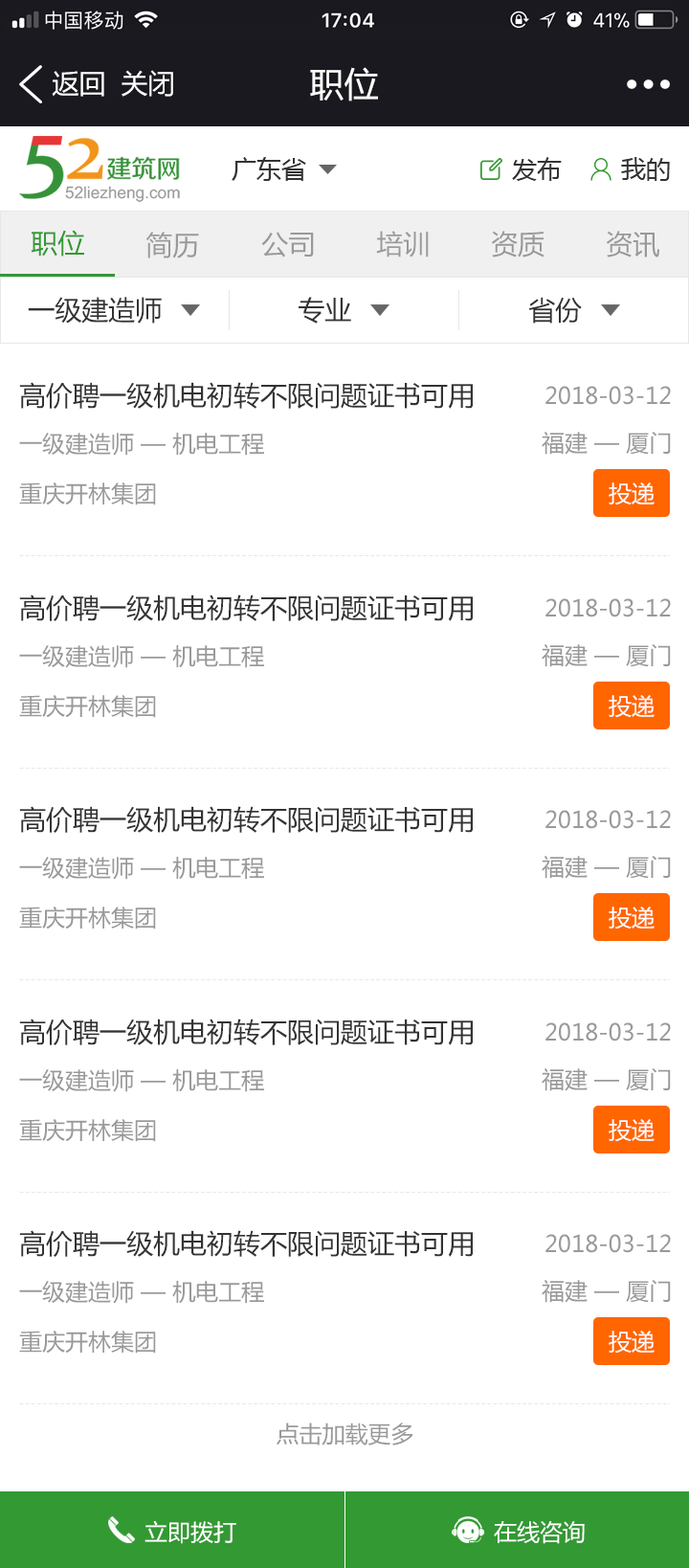
<style>
.page{position:relative;width:689px;height:1568px;background:#ffffff}
.page>*{position:absolute;margin:0}
.t1{font:26.8px "MicrosoftYaHei";color:#ffffff}
.t2{font:34.5px "MicrosoftYaHei";color:#ffffff}
.t3{font:24.9px "MicrosoftYaHei";color:#333333}
.t4{font:26.8px "MicrosoftYaHei";color:#339933}
.t5{font:26.8px "MicrosoftYaHei";color:#999999}
.t6{font:26.8px "MicrosoftYaHei";color:#333333}
.t7{font:23px "MicrosoftYaHei";color:#999999}
.t8{font:23px "MicrosoftYaHei";color:#ffffff}
</style>
<div class="page">
<p class="t1" style="left:52px;top:71px;width:52px;height:26px">返回</p>
<p class="t1" style="left:122px;top:70px;width:51px;height:27px">关闭</p>
<p class="t2" style="left:310px;top:67px;width:68px;height:34px">职位</p>
<p class="t3" style="left:232px;top:157px;width:74px;height:24px">广东省</p>
<p class="t3" style="left:512px;top:157px;width:50px;height:24px">发布</p>
<p class="t3" style="left:621px;top:157px;width:49px;height:24px">我的</p>
<p class="t4" style="left:31px;top:230px;width:53px;height:27px">职位</p>
<p class="t5" style="left:146px;top:232px;width:53px;height:26px">简历</p>
<p class="t5" style="left:261px;top:232px;width:53px;height:26px">公司</p>
<p class="t5" style="left:376px;top:231px;width:53px;height:27px">培训</p>
<p class="t5" style="left:491px;top:231px;width:54px;height:27px">资质</p>
<p class="t5" style="left:606px;top:231px;width:54px;height:27px">资讯</p>
<p class="t6" style="left:28px;top:297px;width:134px;height:27px">一级建造师</p>
<p class="t6" style="left:299px;top:297px;width:52px;height:27px">专业</p>
<p class="t6" style="left:528px;top:297px;width:54px;height:27px">省份</p>
<p class="t6" style="left:19px;top:382px;width:454px;height:27px">高价聘一级机电初转不限问题证书可用</p>
<p class="t7" style="left:546px;top:386px;width:125px;height:19px">2018-03-12</p>
<p class="t7" style="left:19px;top:433px;width:245px;height:23px">一级建造师 — 机电工程</p>
<p class="t7" style="left:542px;top:432px;width:129px;height:23px">福建 — 厦门</p>
<p class="t7" style="left:19px;top:482px;width:137px;height:23px">重庆开林集团</p>
<p class="t8" style="left:609px;top:482px;width:46px;height:23px">投递</p>
<p class="t6" style="left:19px;top:594px;width:454px;height:27px">高价聘一级机电初转不限问题证书可用</p>
<p class="t7" style="left:546px;top:598px;width:125px;height:19px">2018-03-12</p>
<p class="t7" style="left:19px;top:645px;width:245px;height:23px">一级建造师 — 机电工程</p>
<p class="t7" style="left:542px;top:644px;width:129px;height:23px">福建 — 厦门</p>
<p class="t7" style="left:19px;top:695px;width:137px;height:23px">重庆开林集团</p>
<p class="t8" style="left:609px;top:695px;width:46px;height:23px">投递</p>
<p class="t6" style="left:19px;top:806px;width:454px;height:27px">高价聘一级机电初转不限问题证书可用</p>
<p class="t7" style="left:546px;top:810px;width:125px;height:19px">2018-03-12</p>
<p class="t7" style="left:19px;top:857px;width:245px;height:23px">一级建造师 — 机电工程</p>
<p class="t7" style="left:542px;top:856px;width:129px;height:23px">福建 — 厦门</p>
<p class="t7" style="left:19px;top:907px;width:137px;height:23px">重庆开林集团</p>
<p class="t8" style="left:609px;top:907px;width:46px;height:23px">投递</p>
<p class="t6" style="left:19px;top:1019px;width:454px;height:26px">高价聘一级机电初转不限问题证书可用</p>
<p class="t7" style="left:546px;top:1022px;width:125px;height:20px">2018-03-12</p>
<p class="t7" style="left:19px;top:1069px;width:245px;height:23px">一级建造师 — 机电工程</p>
<p class="t7" style="left:542px;top:1068px;width:129px;height:23px">福建 — 厦门</p>
<p class="t7" style="left:19px;top:1119px;width:137px;height:23px">重庆开林集团</p>
<p class="t8" style="left:609px;top:1119px;width:46px;height:23px">投递</p>
<p class="t6" style="left:19px;top:1230px;width:454px;height:27px">高价聘一级机电初转不限问题证书可用</p>
<p class="t7" style="left:546px;top:1234px;width:125px;height:19px">2018-03-12</p>
<p class="t7" style="left:19px;top:1281px;width:245px;height:23px">一级建造师 — 机电工程</p>
<p class="t7" style="left:542px;top:1280px;width:129px;height:23px">福建 — 厦门</p>
<p class="t7" style="left:19px;top:1331px;width:137px;height:23px">重庆开林集团</p>
<p class="t8" style="left:609px;top:1331px;width:46px;height:23px">投递</p>
<p class="t7" style="left:277px;top:1422px;width:136px;height:23px">点击加载更多</p>
<p class="t8" style="left:145px;top:1520px;width:91px;height:24px">立即拨打</p>
<p class="t8" style="left:494px;top:1521px;width:91px;height:23px">在线咨询</p>
</div>
